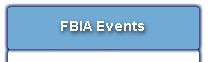
<style>
.page{position:relative;width:208px;height:62px;background:#70aad5}
.page>*{position:absolute;margin:0}
.t1{font:14px "Arial-BoldMT";color:#ffffff}
</style>
<div class="page">
<p class="t1" style="left:61px;top:21px;width:83px;height:10px">FBIA Events</p>
</div>
